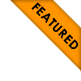
<style>
.page{position:relative;width:81px;height:81px;background:#ffffff}
.page>*{position:absolute;margin:0}
.t1{font:12.5px "CenturyGothic-Bold";letter-spacing:0.04em;color:#000000}
</style>
<div class="page">
<p class="t1" style="left:31px;top:2px;width:48px;height:48px;rotate:45deg">FEATURED</p>
</div>
